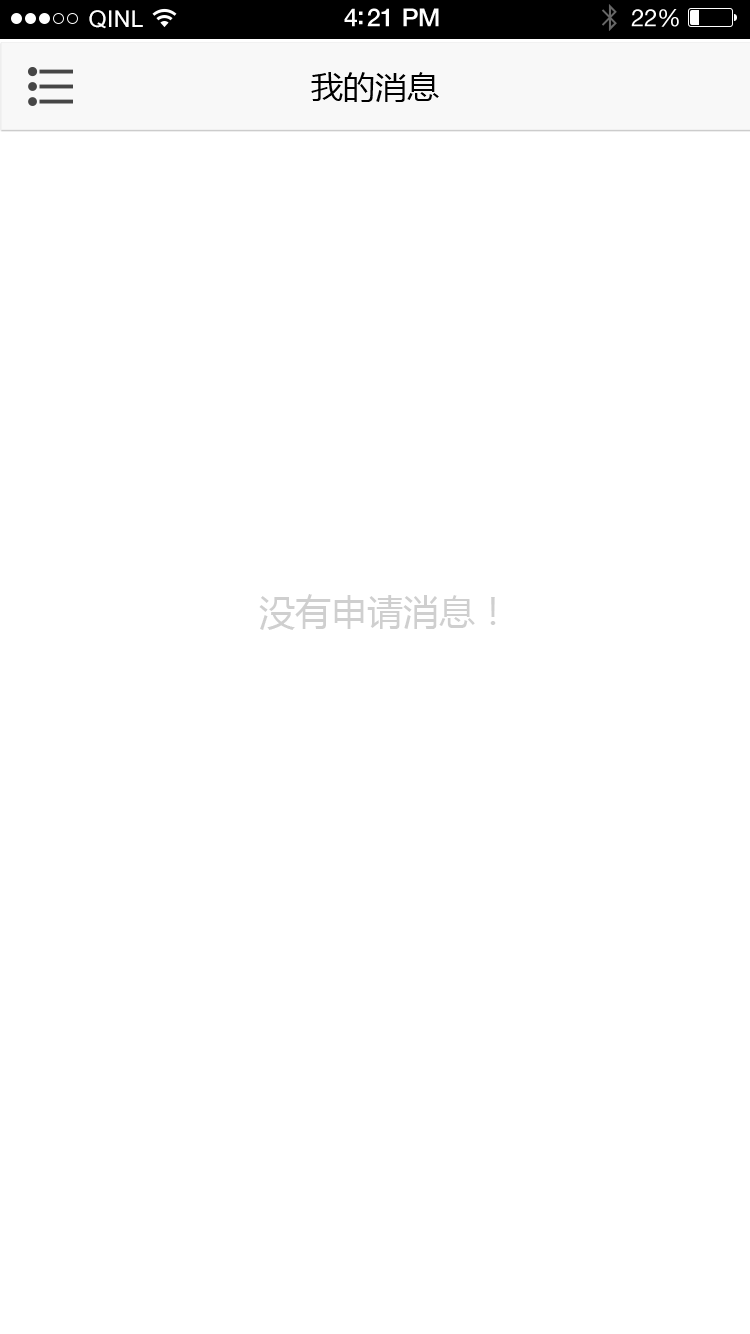
<style>
.page{position:relative;width:750px;height:1334px;background:#ffffff}
.page>*{position:absolute;margin:0}
.t1{font:23px "ArialUnicodeMS";letter-spacing:0.02em;color:#ffffff}
.t2{font:25px "HelveticaNeue-Medium";letter-spacing:-0.02em;color:#ffffff}
.t3{font:24px "HelveticaNeue";letter-spacing:-0.02em;color:#ffffff}
.t4{font:32px "MicrosoftYaHei";color:#000000}
.t5{font:36px "MicrosoftYaHei";color:#cfcfcf}
</style>
<div class="page">
<p class="t1" style="left:89px;top:10px;width:54px;height:19px">QINL</p>
<p class="t2" style="left:344px;top:8px;width:95px;height:19px">4:21 PM</p>
<p class="t3" style="left:631px;top:9px;width:48px;height:18px">22%</p>
<p class="t4" style="left:311px;top:72px;width:128px;height:30px">我的消息</p>
<p class="t5" style="left:259px;top:594px;width:237px;height:36px">没有申请消息！</p>
</div>
